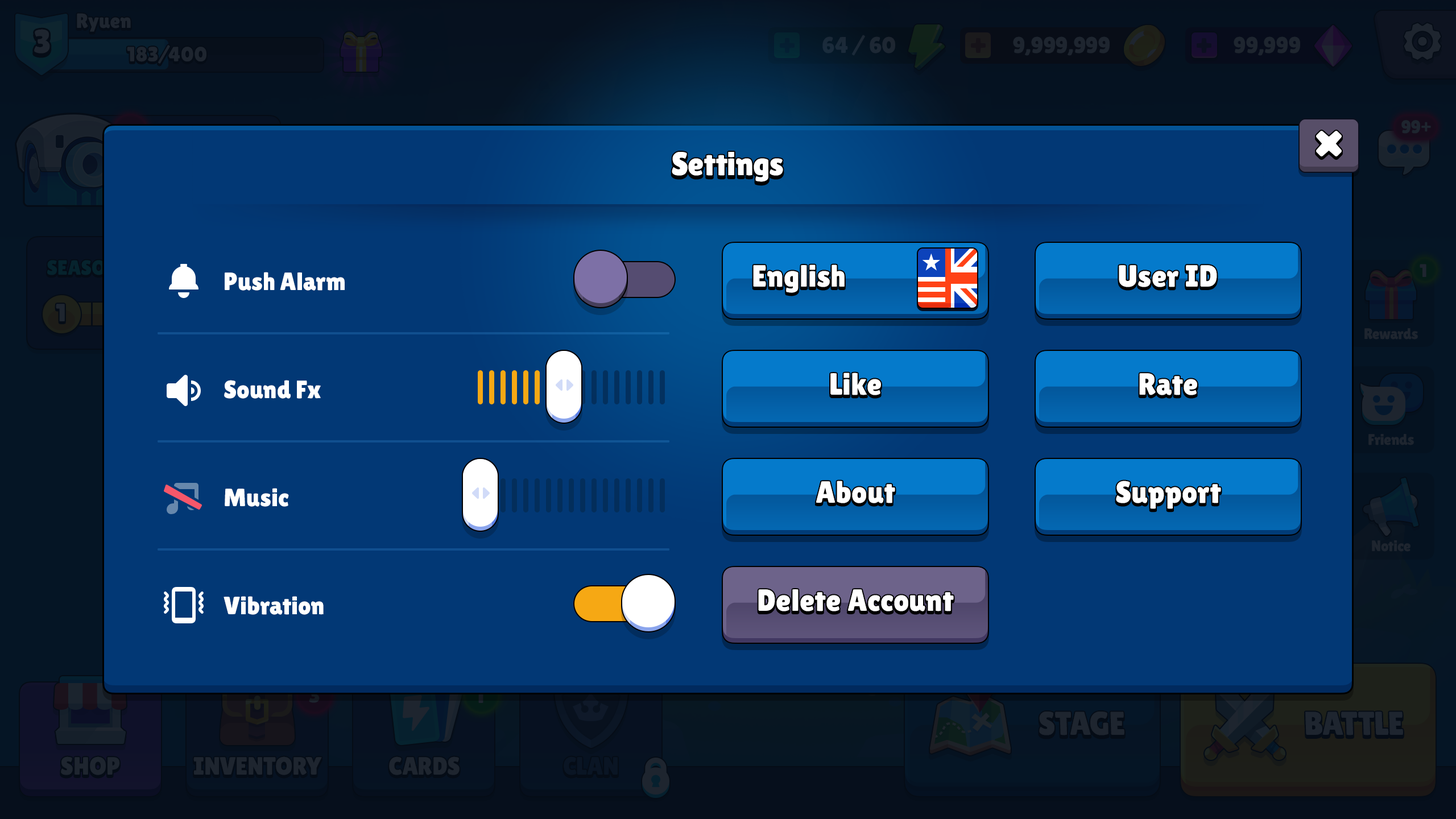
<style>
.page{position:relative;width:1456px;height:819px;background:#023875}
.page>*{position:absolute;margin:0}
.t1{font:33px "LilitaOne";color:#ffffff}
.t2{font:30.7px "LilitaOne";letter-spacing:0.02em;color:#ffffff}
.t3{font:25px/108.1px "LilitaOne";color:#ffffff}
</style>
<div class="page">
<p class="t1" style="left:672px;top:152px;width:111px;height:30px">Settings</p>
<p class="t2" style="left:753px;top:264px;width:92px;height:29px">English</p>
<p class="t2" style="left:1119px;top:265px;width:98px;height:22px">User ID</p>
<p class="t3" style="left:224px;top:272px;width:121px;height:343px">Push Alarm<br>Sound Fx<br>Music<br>Vibration</p>
<p class="t2" style="left:830px;top:373px;width:51px;height:22px">Like</p>
<p class="t2" style="left:1139px;top:373px;width:58px;height:22px">Rate</p>
<p class="t2" style="left:816px;top:481px;width:79px;height:22px">About</p>
<p class="t2" style="left:1116px;top:481px;width:105px;height:28px">Support</p>
<p class="t2" style="left:758px;top:589px;width:196px;height:22px">Delete Account</p>
</div>
